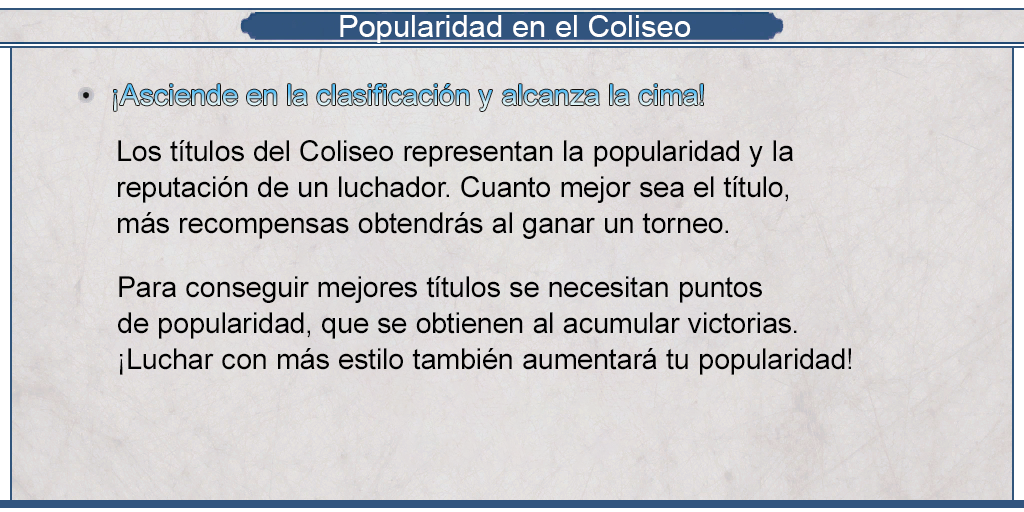
<style>
.page{position:relative;width:1024px;height:512px}
.page>*{position:absolute;margin:0}
.t1{font:30.8px "ArialMT";color:#ffffff}
.t2{font:29px/36px "ArialMT";color:#000000}
</style>
<div class="page">
<p class="t1" style="left:340px;top:15px;width:351px;height:28px">Popularidad en el Coliseo</p>
<p class="t2" style="left:118px;top:140px;width:675px;height:99px">Los títulos del Coliseo representan la popularidad y la <br>reputación de un luchador. Cuanto mejor sea el título, <br>más recompensas obtendrás al ganar un torneo.</p>
<p class="t2" style="left:118px;top:276px;width:733px;height:99px">Para conseguir mejores títulos se necesitan puntos <br>de popularidad, que se obtienen al acumular victorias.<br>¡Luchar con más estilo también aumentará tu popularidad!</p>
</div>
